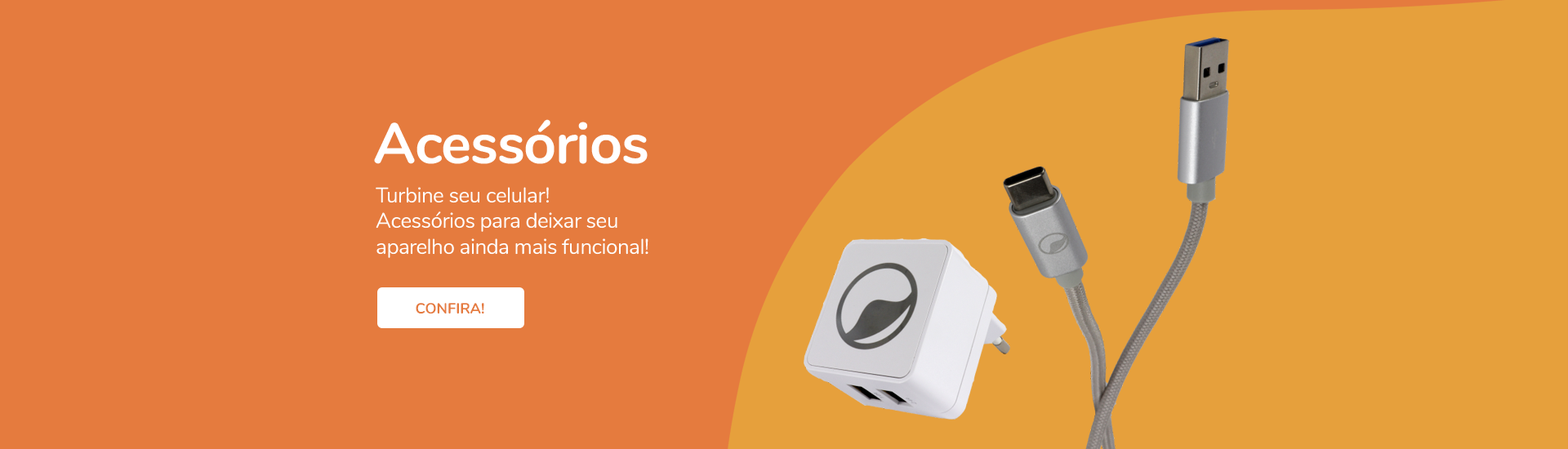
<style>
.page{position:relative;width:1568px;height:449px;background:#e57b3e}
.page>*{position:absolute;margin:0}
.t1{font:57.2px "Nunito-Bold";letter-spacing:-0.02em;color:#ffffff}
.t2{font:21.2px "Nunito-Regular";letter-spacing:-0.02em;color:#ffffff}
.t3{font:14.7px "Nunito-Bold";color:#e57b3e}
</style>
<div class="page">
<p class="t1" style="left:374px;top:119px;width:274px;height:45px">Acessórios</p>
<p class="t2" style="left:376px;top:187px;width:272px;height:71px">Turbine seu celular!<br>Acessórios para deixar seu<br>aparelho ainda mais funcional!</p>
<p class="t3" style="left:416px;top:303px;width:68px;height:11px">CONFIRA!</p>
</div>
